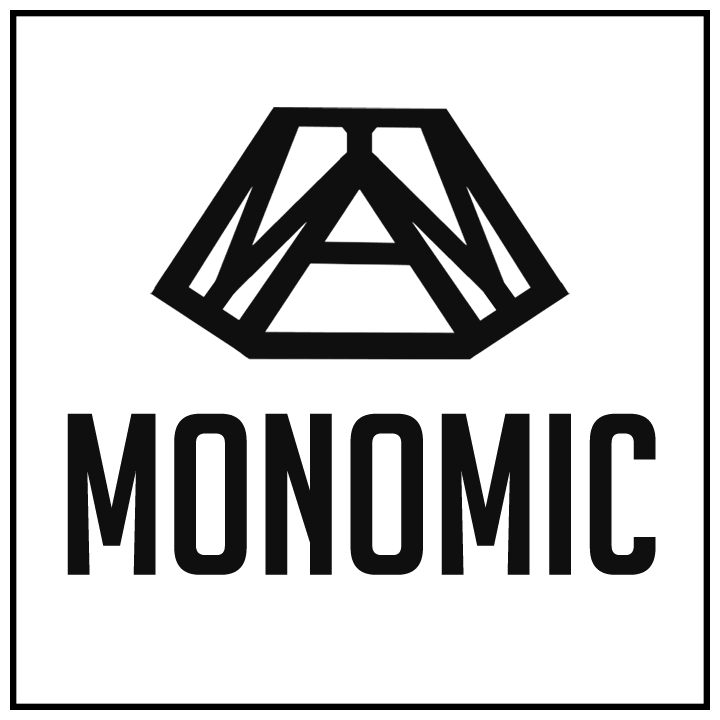
<style>
.page{position:relative;width:720px;height:720px;background:#ffffff}
.page>*{position:absolute;margin:0}
.t1{font:224.1px "BigNoodleTitling";color:#0f0f0f}
</style>
<div class="page">
<p class="t1" style="left:67px;top:413px;width:589px;height:162px">moNOMIC</p>
</div>
